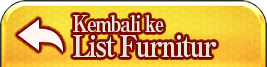
<style>
.page{position:relative;width:267px;height:67px}
.page>*{position:absolute;margin:0}
.t1{font:30px/18px "RyuminPro-ExBold";letter-spacing:-0.08em;color:#ede4d7;scale:0.9 1}
.t2{font:22px/18px "RyuminPro-ExBold";letter-spacing:-0.08em;color:#ede4d7;scale:0.9 1}
</style>
<div class="page">
<p class="t1" style="left:73px;top:15px;width:144px;height:43px"><span class="t2">Kembali ke<br></span>List Furnitur</p>
</div>
